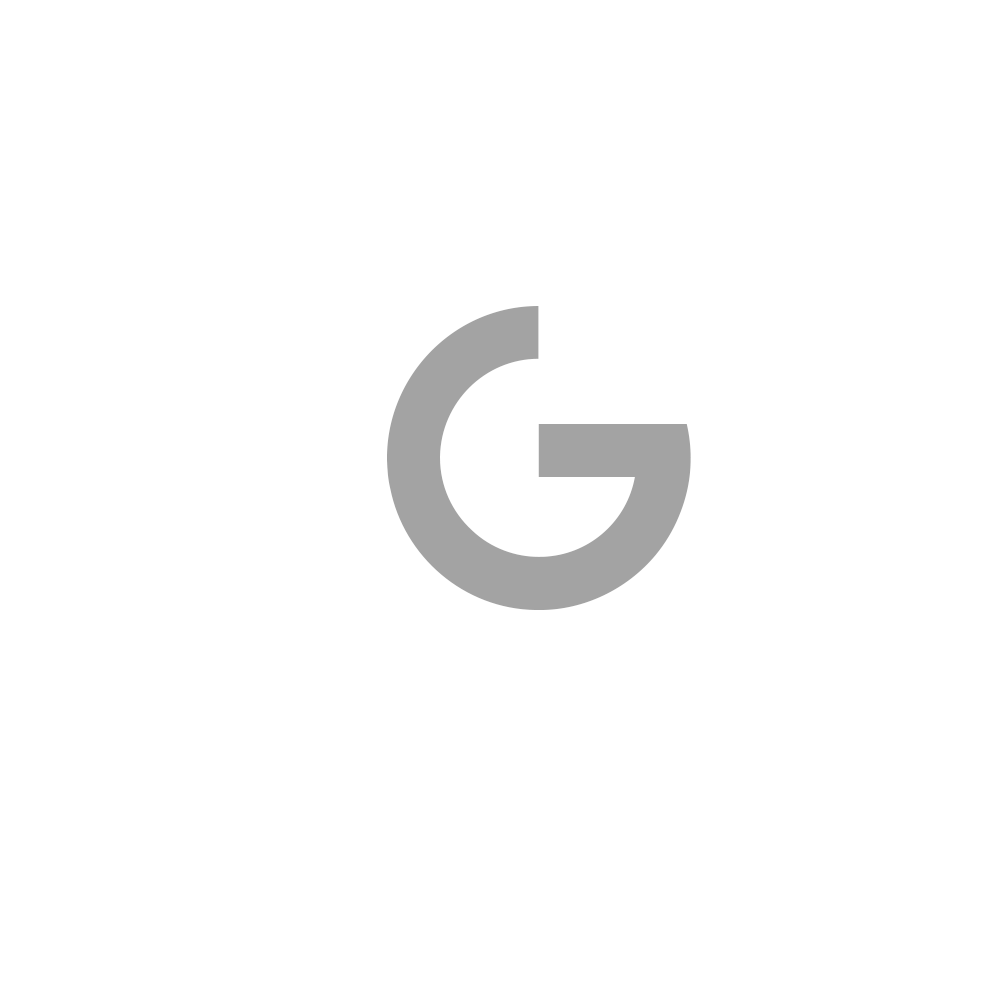
<style>
.page{position:relative;width:1000px;height:1000px;background:#ffffff}
.page>*{position:absolute;margin:0}
.t1{font:323.8px "digitalgeometric-Bold";color:#a3a3a3}
</style>
<div class="page">
<p class="t1" style="left:387px;top:306px;width:304px;height:304px">G</p>
</div>
